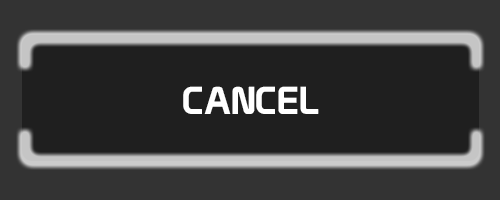
<style>
.page{position:relative;width:500px;height:200px;background:#1f1f1f}
.page>*{position:absolute;margin:0}
.t1{font:38px "Prototype";color:#ffffff}
</style>
<div class="page">
<p class="t1" style="left:183px;top:86px;width:136px;height:28px">CANCEL</p>
</div>
